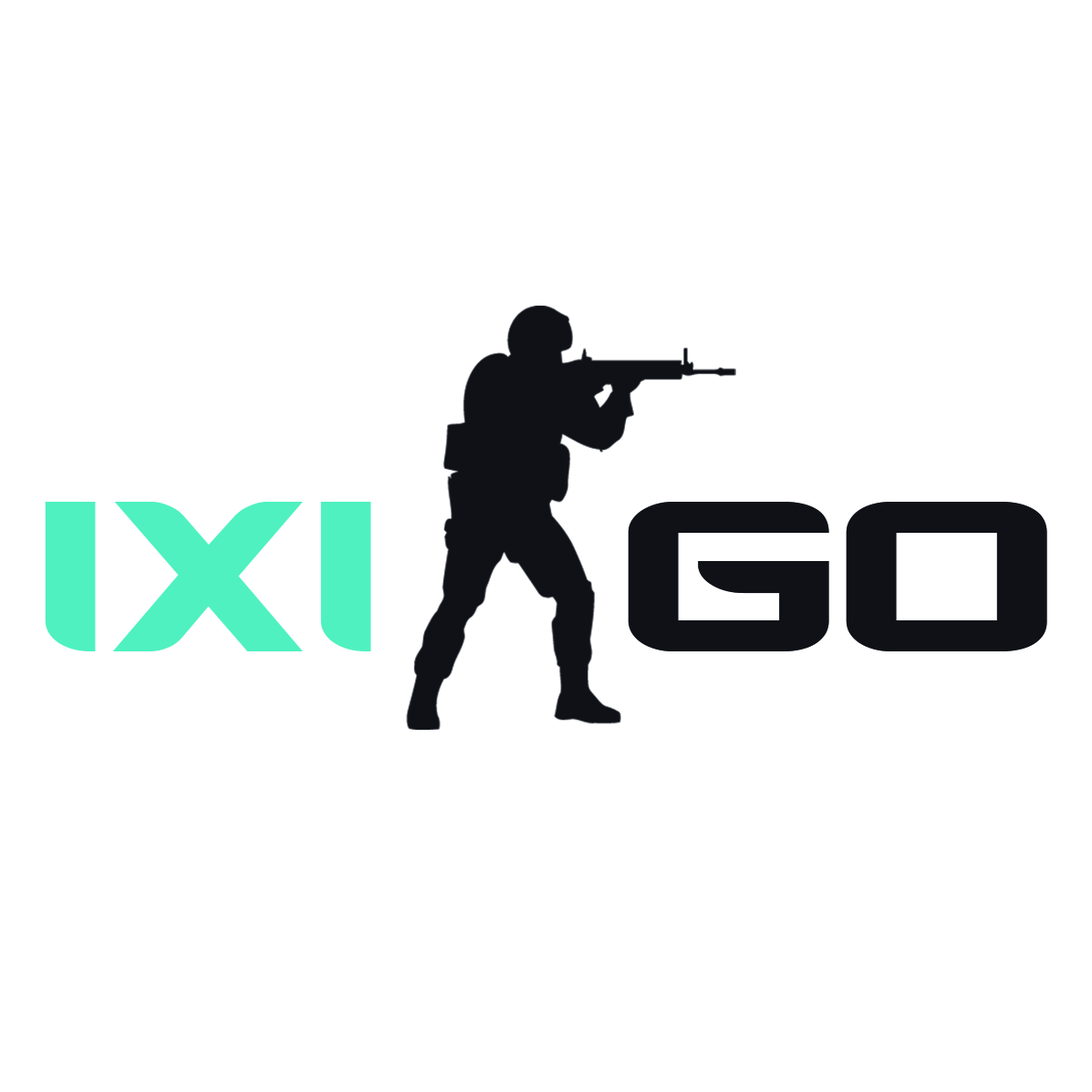
<style>
.page{position:relative;width:1092px;height:1092px;background:#ffffff}
.page>*{position:absolute;margin:0}
.t1{font:298.1px "Counter-StrikeRegular";color:#4ff1c0}
.t2{font:298.1px "Counter-StrikeRegular";color:#0f1116}
</style>
<div class="page">
<p class="t1" style="left:45px;top:502px;width:326px;height:149px">IXI</p>
<p class="t2" style="left:628px;top:502px;width:419px;height:149px">GO</p>
</div>
